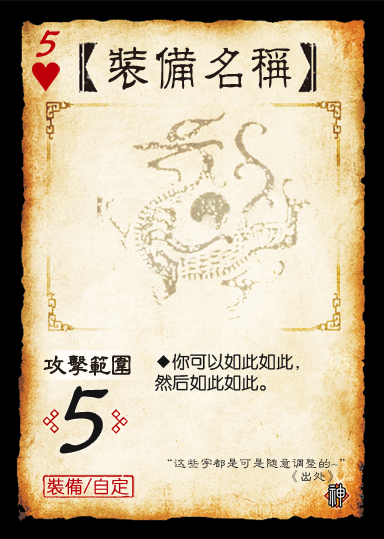
<style>
.page{position:relative;width:384px;height:539px}
.page>*{position:absolute;margin:0}
.t1{font:48.1px "Jxixinkai";color:#be0008;font-weight:bold;font-style:italic}
.t2{font:50.2px "¾­µä·±½ÇÁ¥ Regular";color:#221815;scale:0.95 1}
.t3{font:17.5px/21.8px "FZY3JW--GB1-0";letter-spacing:-0.01em;color:#151515}
.t4{font:26.2px "FZLBFW--GB1-0";color:#231915;font-weight:bold;scale:0.9 1}
.t5{font:122.3px "Jxixinkai";color:#151515}
.t6{font:13.1px/13.1px "FZLBJW--GB1-0";color:#151515}
.t7{font:17.5px "YouYuan";color:#ba0007;font-weight:bold}
</style>
<div class="page">
<p class="t1" style="left:36px;top:30px;width:24px;height:27px">5</p>
<p class="t2" style="left:108px;top:46px;width:184px;height:44px">装备名称</p>
<p class="t3" style="left:155px;top:353px;width:144px;height:38px">◆你可以如此如此，<br>然后如此如此。</p>
<p class="t4" style="left:43px;top:354px;width:88px;height:23px">攻击范围</p>
<p class="t5" style="left:60px;top:387px;width:48px;height:66px">5</p>
<p class="t6" style="left:167px;top:458px;width:178px;height:25px;text-align:right">“这些字都是可是随意调整的~”<br>                                      《出处》</p>
<p class="t7" style="left:47px;top:478px;width:82px;height:17px">裝備/自定</p>
</div>
